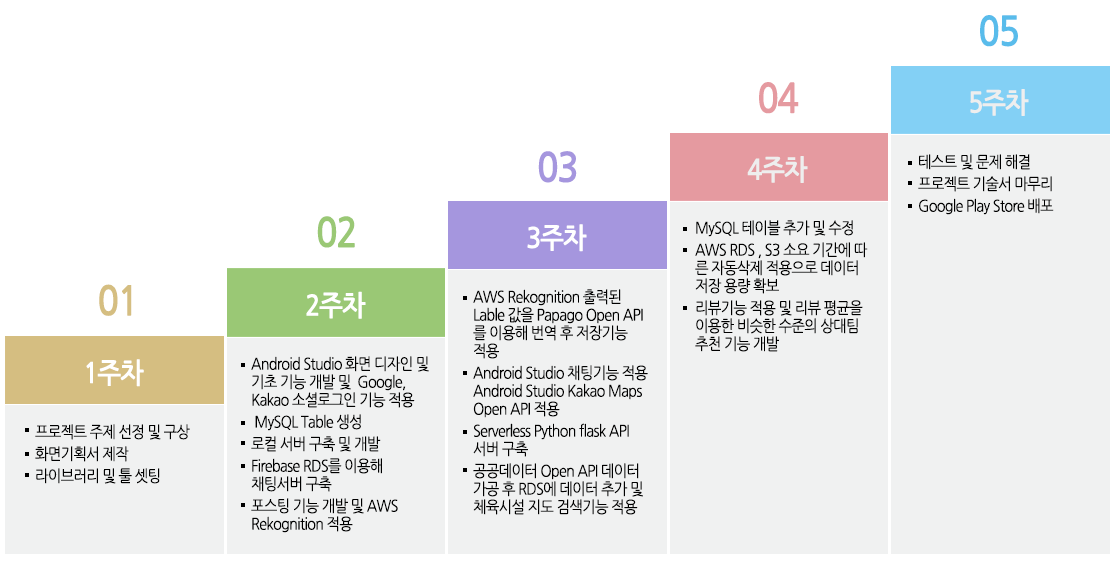
<style>
.page{position:relative;width:1116px;height:568px;background:#f0f1f1}
.page>*{position:absolute;margin:0}
.t1{font:40.2px "NanumGothicBold";letter-spacing:-0.05em;color:#59bceb;scale:0.9 1}
.t2{font:40.2px "NanumGothicBold";letter-spacing:-0.05em;color:#e59aa0;scale:0.9 1}
.t3{font:28.1px "NanumGothicBold";letter-spacing:-0.05em;color:#eeeeee;scale:0.9 1}
.t4{font:40.2px "NanumGothicBold";letter-spacing:-0.05em;color:#a596de;scale:0.9 1}
.t5{font:16px/22px "NanumGothic";letter-spacing:-0.05em;color:#000000;scale:0.9 1}
.t6{font:40.2px "NanumGothicBold";letter-spacing:-0.05em;color:#9ac875;scale:0.9 1}
.t7{font:16px/18px "NanumGothic";letter-spacing:-0.05em;color:#000000;scale:0.9 1}
.t8{font:28.1px "NanumGothicBold";letter-spacing:-0.05em;color:#ffffff;scale:0.9 1}
.t9{font:40.2px "NanumGothicBold";letter-spacing:-0.05em;color:#d5be81;scale:0.9 1}
</style>
<div class="page">
<p class="t1" style="left:980px;top:15px;width:38px;height:32px">05</p>
<p class="t2" style="left:759px;top:82px;width:40px;height:32px">04</p>
<p class="t3" style="left:970px;top:89px;width:59px;height:27px">5주차</p>
<p class="t4" style="left:538px;top:151px;width:39px;height:32px">03</p>
<p class="t3" style="left:747px;top:156px;width:61px;height:27px">4주차</p>
<p class="t5" style="left:918px;top:154px;width:136px;height:61px">테스트 및 문제 해결<br>프로젝트 기술서 마무리<br>Google Play Store 배포</p>
<p class="t6" style="left:317px;top:216px;width:38px;height:32px">02</p>
<p class="t5" style="left:695px;top:220px;width:173px;height:132px">MySQL 테이블 추가 및 수정<br>AWS RDS , S3 소요 기간에 따<br><span class="t7">른 자동삭제 적용으로 데이터<br>저장 용량 확보<br></span>리뷰기능 적용 및 리뷰 평균을<br><span class="t7">이용한 비슷한 수준의 상대팀<br>추천 기능 개발</span></p>
<p class="t8" style="left:527px;top:224px;width:60px;height:28px">3주차</p>
<p class="t9" style="left:99px;top:284px;width:33px;height:32px">01</p>
<p class="t8" style="left:306px;top:291px;width:60px;height:28px">2주차</p>
<p class="t7" style="left:473px;top:289px;width:175px;height:226px"><span class="t5">AWS Rekognition 출력된<br></span>Lable 값을 Papago Open API<br>를 이용해 번역 후 저장기능<br>적용<br><span class="t5">Android Studio 채팅기능 적용<br></span>Android Studio Kakao Maps<br>Open API 적용<br><span class="t5">Serverless Python flask API <br></span>서버 구축<br><span class="t5">공공데이터 Open API 데이터<br></span>가공 후 RDS에 데이터 추가 및<br>체육시설 지도 검색기능 적용</p>
<p class="t8" style="left:86px;top:359px;width:58px;height:28px">1주차</p>
<p class="t7" style="left:251px;top:356px;width:178px;height:177px">Android Studio 화면 디자인 및<br>기초 기능 개발 및  Google,<br>Kakao 소셜로그인 기능 적용<br><span class="t5"> MySQL Table 생성<br>로컬 서버 구축 및 개발<br>Firebase RDS를 이용해<br></span>채팅서버 구축<br><span class="t5">포스팅 기능 개발 및 AWS<br></span>Rekognition 적용</p>
<p class="t5" style="left:35px;top:424px;width:155px;height:60px">프로젝트 주제 선정 및 구상<br>화면기획서 제작<br>라이브러리 및 툴 셋팅</p>
</div>
